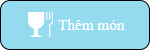
<style>
.page{position:relative;width:150px;height:50px;background:#94dbf0}
.page>*{position:absolute;margin:0}
.t1{font:15.3px "TimesNewRomanPSMT";color:#fefefe}
</style>
<div class="page">
<p class="t1" style="left:58px;top:19px;width:67px;height:11px">Thêm món</p>
</div>
